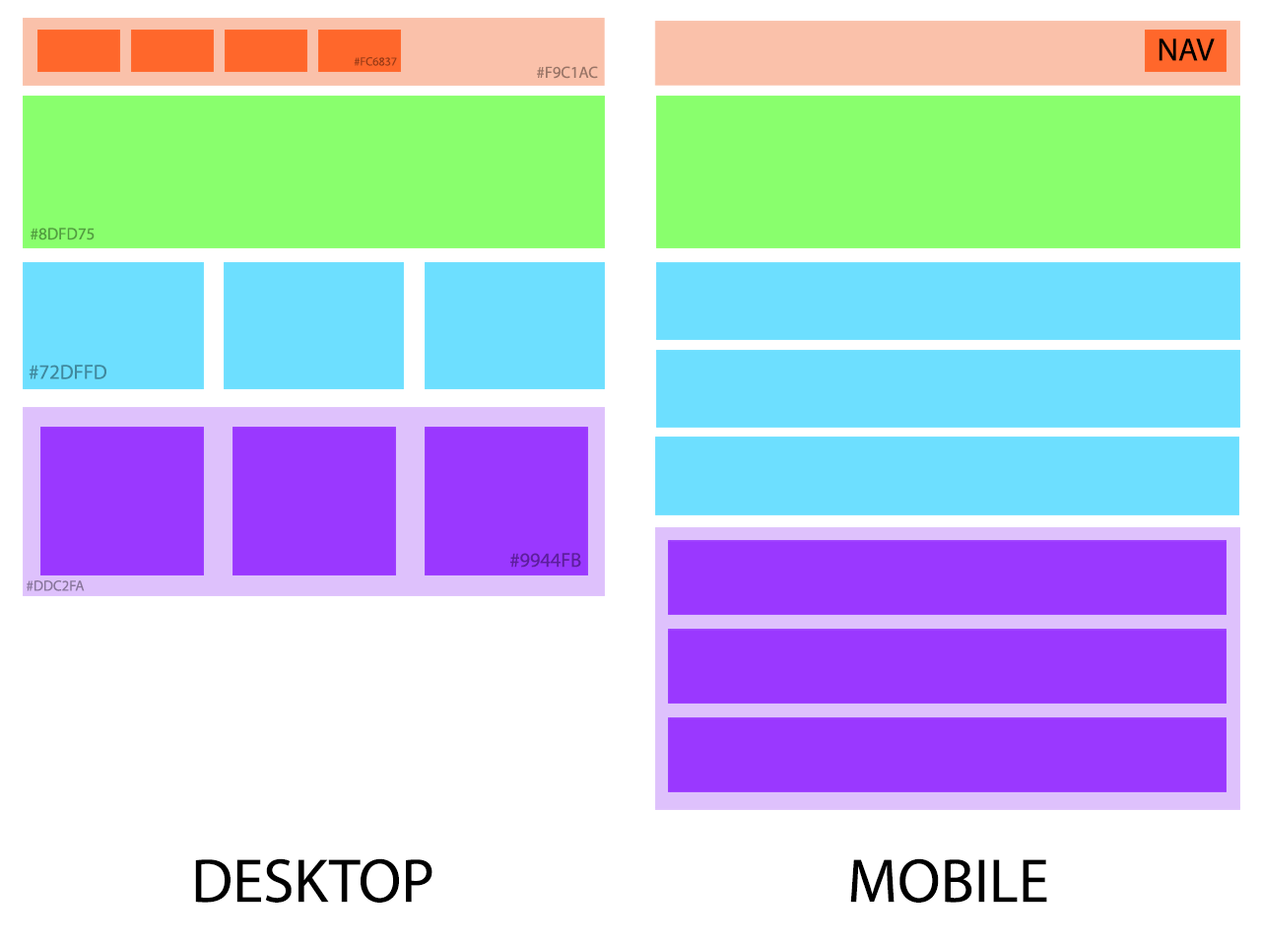
<style>
.page{position:relative;width:1261px;height:946px;background:#ffffff}
.page>*{position:absolute;margin:0}
.t1{font:32.2px "MyriadPro-Regular";color:#000000}
.t2{font:11.9px "MyriadPro-Regular";color:#9d3c16}
.t3{font:16.3px "MyriadPro-Regular";color:#997567}
.t4{font:16.8px "MyriadPro-Regular";color:#529d40}
.t5{font:20.5px "MyriadPro-Regular";color:#40889d}
.t6{font:20px "MyriadPro-Regular";color:#5d1e9d}
.t7{font:14.7px "MyriadPro-Regular";color:#88759b}
.t8{font:62.3px "MyriadPro-Regular";color:#000000}
</style>
<div class="page">
<p class="t1" style="left:1158px;top:38px;width:57px;height:23px">NAV</p>
<p class="t2" style="left:354px;top:57px;width:43px;height:9px">#FC6837</p>
<p class="t3" style="left:537px;top:66px;width:61px;height:13px">#F9C1AC</p>
<p class="t4" style="left:31px;top:228px;width:64px;height:12px">#8DFD75</p>
<p class="t5" style="left:29px;top:364px;width:77px;height:15px">#72DFFD</p>
<p class="t6" style="left:510px;top:553px;width:71px;height:14px">#9944FB</p>
<p class="t7" style="left:27px;top:580px;width:58px;height:11px">#DDC2FA</p>
<p class="t8" style="left:195px;top:858px;width:237px;height:44px">DESKTOP</p>
<p class="t8" style="left:850px;top:858px;width:197px;height:44px">MOBILE</p>
</div>
